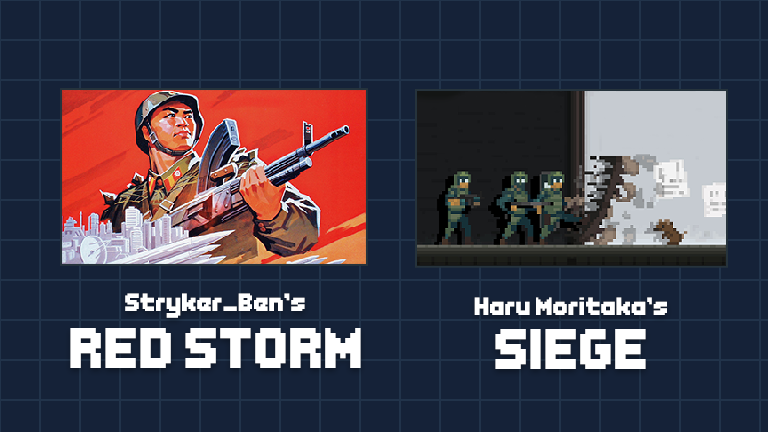
<style>
.page{position:relative;width:768px;height:432px;background:#152238}
.page>*{position:absolute;margin:0}
.t1{font:24px "Endless-Boss-Battle";color:#ffffff}
.t2{font:55px "Endless-Boss-Battle";color:#ffffff}
</style>
<div class="page">
<p class="t1" style="left:125px;top:293px;width:180px;height:25px">Stryker_Ben’s</p>
<p class="t1" style="left:474px;top:297px;width:193px;height:18px">Haru Moritaka’s</p>
<p class="t2" style="left:70px;top:328px;width:291px;height:40px">RED STORM</p>
<p class="t2" style="left:495px;top:329px;width:151px;height:40px">SIEGE</p>
</div>
